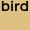
<style>
.page{position:relative;width:30px;height:30px;background:#dec083}
.page>*{position:absolute;margin:0}
.t1{font:12px "SinkinSans-600SemiBold";color:#000000}
</style>
<div class="page">
<p class="t1" style="left:1px;top:0px;width:27px;height:12px">bird</p>
</div>
